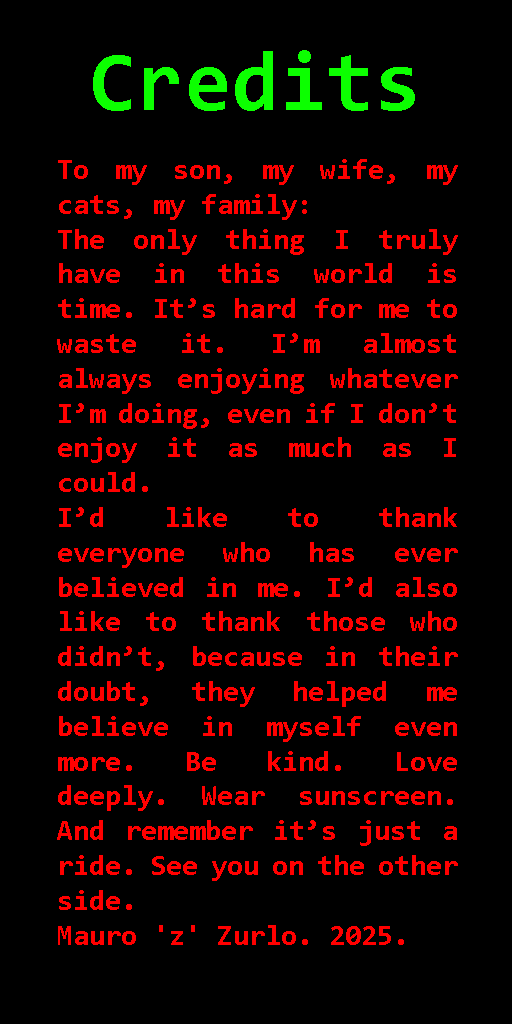
<style>
.page{position:relative;width:512px;height:1024px;background:#000000}
.page>*{position:absolute;margin:0}
.t1{font:85.4px "Consolas-Bold";color:#0cff00}
.t2{font:29px "Consolas-Bold";color:#ff0000}
</style>
<div class="page">
<p class="t1" style="left:93px;top:50px;width:322px;height:61px">Credits</p>
<p class="t2" style="left:57px;top:159px;width:401px;height:786px;text-align:justify">To my son, my wife, my cats, my family:<br>The only thing I truly have in this world is time. It’s hard for me to waste it. I’m almost always enjoying whatever I’m doing, even if I don’t enjoy it as much as I could. <br>I’d like to thank everyone who has ever believed in me. I’d also like to thank those who didn’t, because in their doubt, they helped me believe in myself even more. Be kind. Love deeply. Wear sunscreen. And remember it’s just a ride. See you on the other side. <br>Mauro 'z' Zurlo. 2025.</p>
</div>
